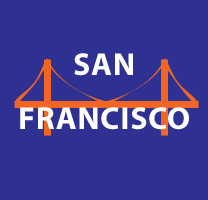
<style>
.page{position:relative;width:208px;height:200px;background:#2e3192}
.page>*{position:absolute;margin:0}
.t1{font:32px/18px "MyriadPro-Bold";letter-spacing:0.025em;color:#ffffff;text-transform:uppercase}
</style>
<div class="page">
<p class="t1" style="left:20px;top:53px;width:169px;height:77px;text-align:center">San<br><br><br>Francisco</p>
</div>
